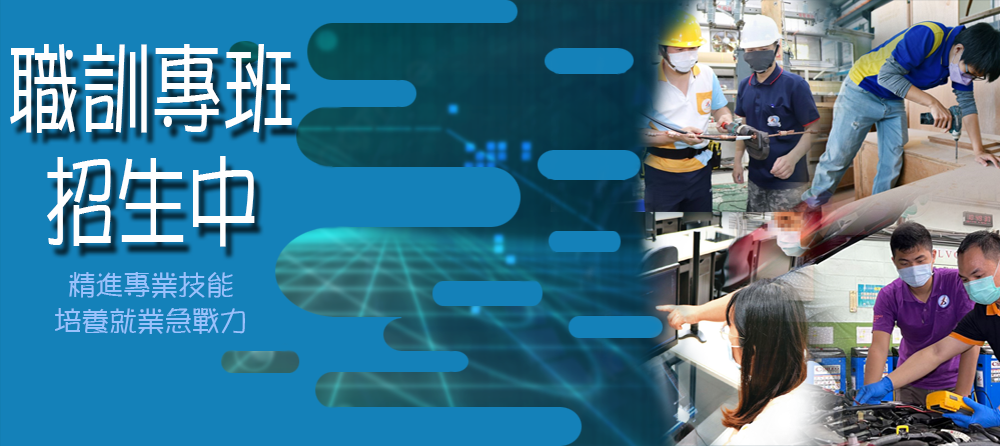
<style>
.page{position:relative;width:1000px;height:446px;background:#1481b9}
.page>*{position:absolute;margin:0}
.t1{font:97.4px/112.6px "DFPOP1-W5-WIN-BF";color:#fefefe;scale:0.73 1}
.t2{font:27.3px/36.3px "DFPOP1-W5-WIN-BF";color:#99c1fc}
.t3{font:43.6px/90.8px "DFPOP1-W5-WIN-BF";color:#fefefe}
</style>
<div class="page">
<p class="t1" style="left:10px;top:44px;width:282px;height:203px;text-align:center">職訓專班<br>招生中</p>
<p class="t2" style="left:55px;top:272px;width:190px;height:62px;text-align:center">精進專業技能<br>培養就業急戰力<br><br><br><span class="t3"></span></p>
</div>
